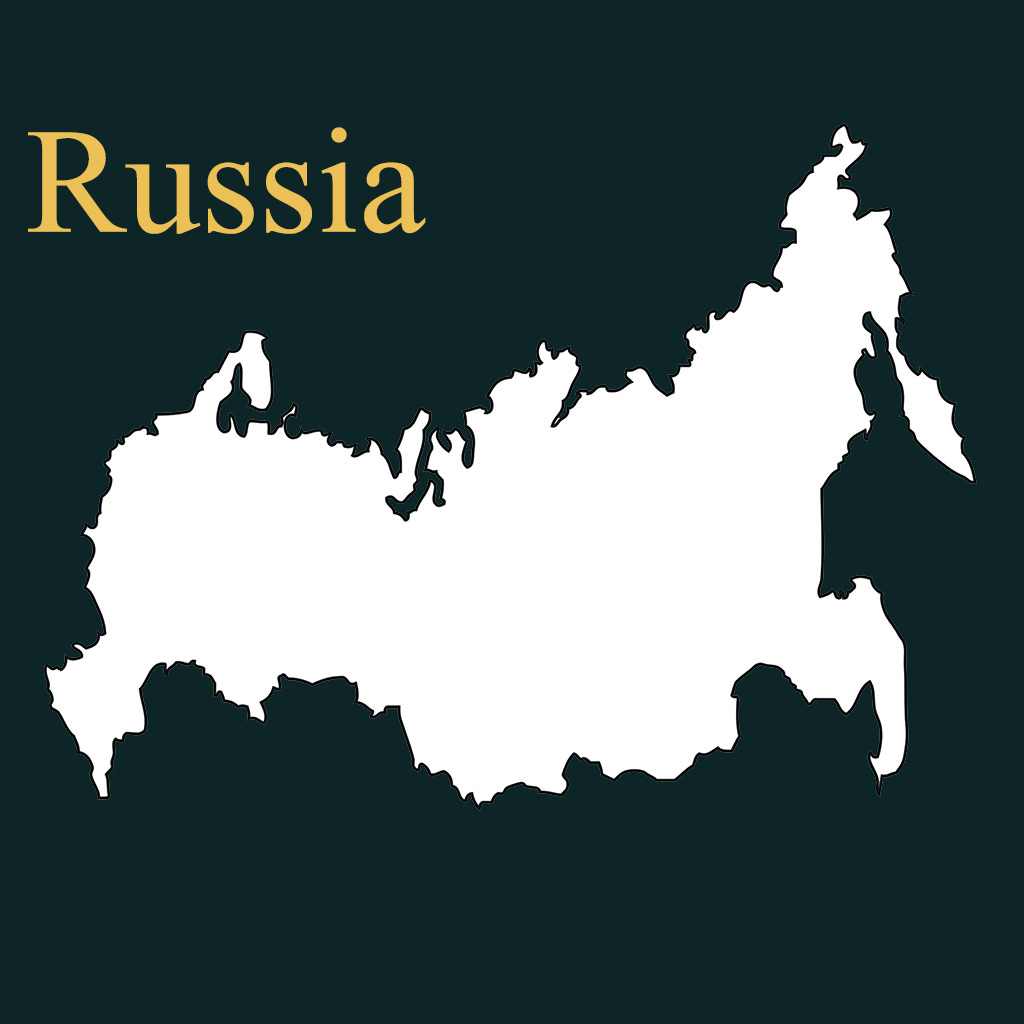
<style>
.page{position:relative;width:1024px;height:1024px;background:#0e2528}
.page>*{position:absolute;margin:0}
.t1{font:150px "TimesNewRomanPSMT";color:#ebc157}
</style>
<div class="page">
<p class="t1" style="left:28px;top:127px;width:398px;height:107px">Russia</p>
</div>
